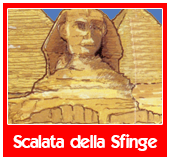
<style>
.page{position:relative;width:170px;height:160px;background:#ff0000}
.page>*{position:absolute;margin:0}
.t1{font:18px "ELEGANCE";color:#ffffff}
</style>
<div class="page">
<p class="t1" style="left:13px;top:134px;width:145px;height:17px">Scalata della Sfinge</p>
</div>
